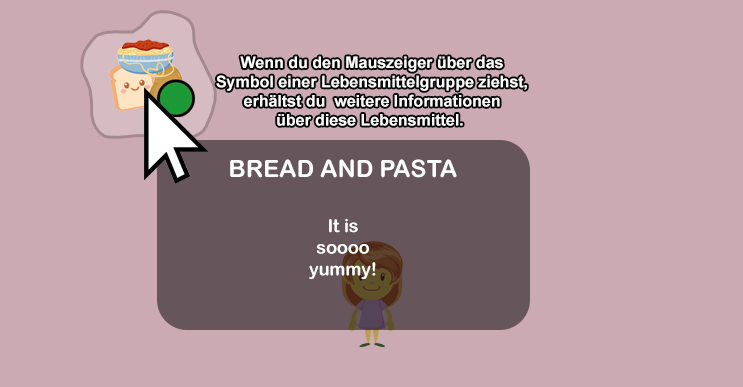
<style>
.page{position:relative;width:743px;height:387px;background:#ccaab4}
.page>*{position:absolute;margin:0}
.t1{font:16px "Arial-BoldMT";color:#ffffff}
.t2{font:24px "ArialRoundedMTBold";color:#ffffff}
.t3{font:18px "ArialRoundedMTBold";color:#ffffff}
</style>
<div class="page">
<p class="t1" style="left:216px;top:56px;width:311px;height:70px;text-align:center">Wenn du den Mauszeiger über das<br>Symbol einer Lebensmittelgruppe ziehst,<br>erhältst du  weitere Informationen<br>über diese Lebensmittel.</p>
<p class="t2" style="left:230px;top:159px;width:227px;height:19px">BREAD AND PASTA</p>
<p class="t3" style="left:309px;top:219px;width:67px;height:60px;text-align:center">It is<br>soooo<br>yummy!</p>
</div>
